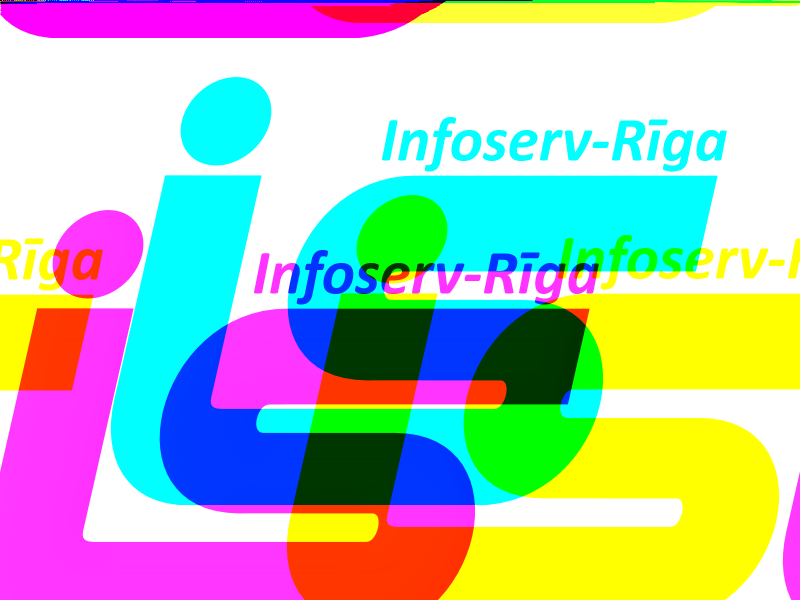
<style>
.page{position:relative;width:800px;height:600px;background:#ffffff}
.page>*{position:absolute;margin:0}
.t1{font:63px "Calibri-BoldItalic";color:#00ffff}
</style>
<div class="page">
<p class="t1" style="left:382px;top:114px;width:345px;height:55px">Infoserv-Rīga</p>
</div>
